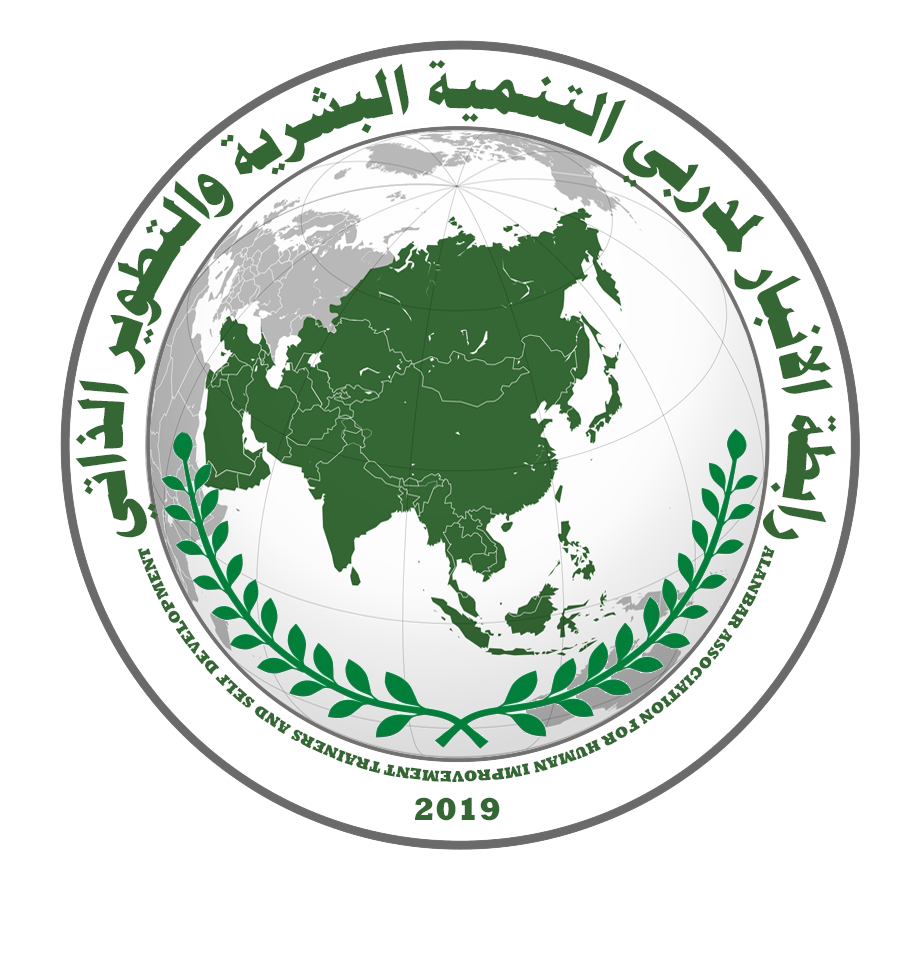
<style>
.page{position:relative;width:920px;height:971px;background:#ffffff}
.page>*{position:absolute;margin:0}
.t1{font:64px/8px "PTBoldHeading";color:#346733}
.t2{font:16px/8px "Rockwell-ExtraBold";color:#346733}
.t3{font:32px "Rockwell-ExtraBold";color:#346733}
</style>
<div class="page">
<p class="t1" style="left:75px;top:60px;width:762px;height:480px;text-align:center">رابطة الانبار لمدربي التنمية البشرية والتطوير الذاتي</p>
<p class="t2" style="left:137px;top:545px;width:638px;height:237px;text-align:center">ALANBAR ASSOCIATION FOR HUMAN IMPROVEMENT TRAINERS AND SELF DEVELOPMENT</p>
<p class="t3" style="left:415px;top:797px;width:85px;height:24px">2019</p>
</div>
